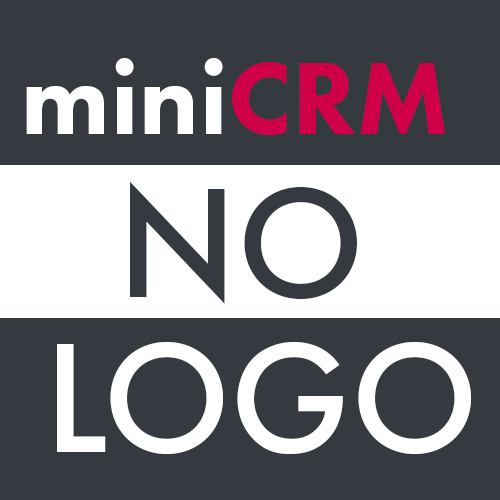
<style>
.page{position:relative;width:500px;height:500px;background:#343a40}
.page>*{position:absolute;margin:0}
.t1{font:106.1px "FuturaNewHeavy-Reg";color:#ffffff}
.t2{font:106.1px "FuturaNewHeavy-Reg";color:#cf0048}
.t3{font:161.3px "FuturaNewMedium-Reg";color:#343a40}
.t4{font:161.3px "FuturaNewMedium-Reg";color:#ffffff}
</style>
<div class="page">
<p class="t1" style="left:26px;top:58px;width:419px;height:77px">mini<span class="t2">CRM</span></p>
<p class="t3" style="left:130px;top:181px;width:227px;height:123px">NO</p>
<p class="t4" style="left:57px;top:341px;width:414px;height:114px">LOGO</p>
</div>
